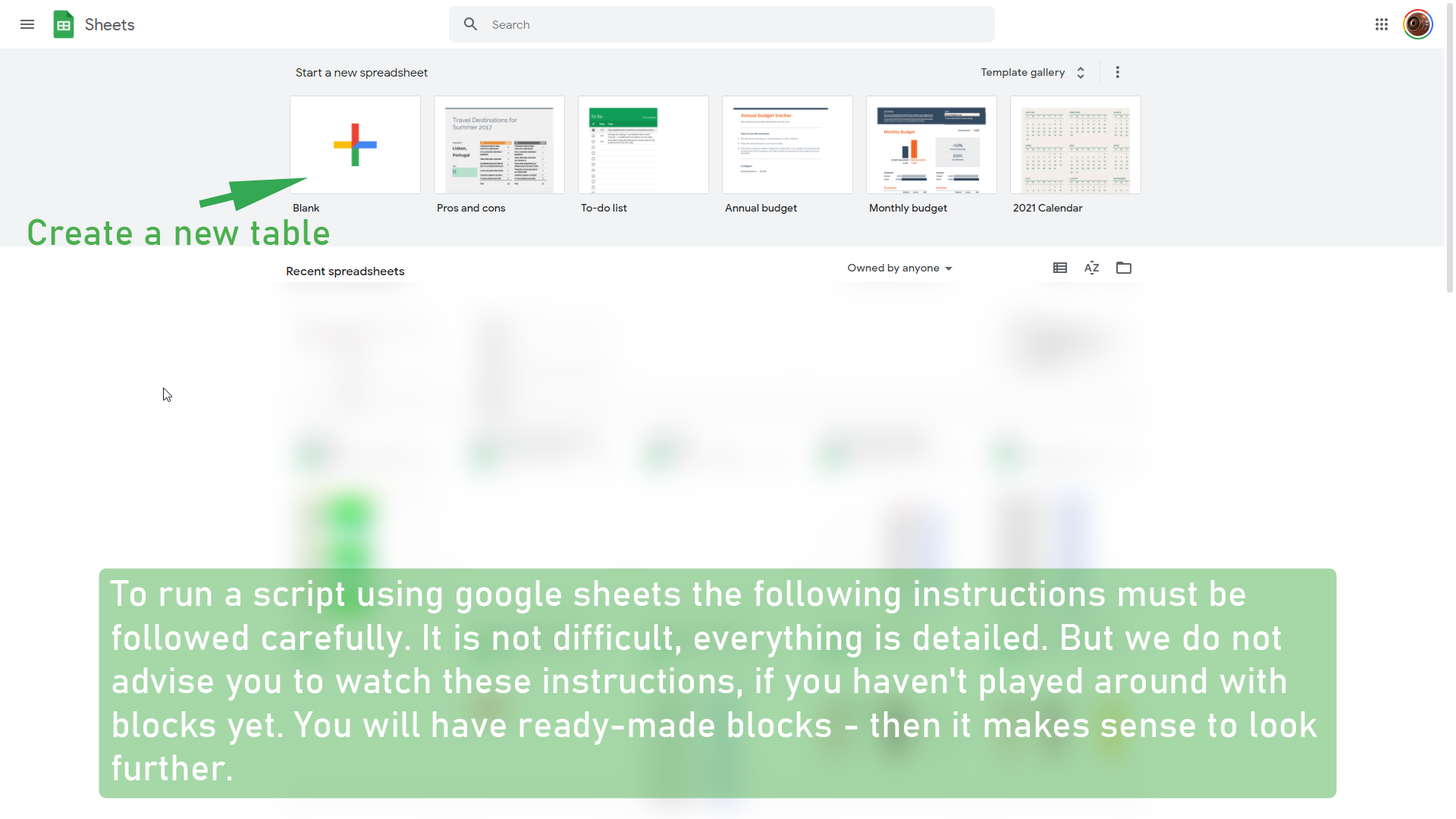
<style>
.page{position:relative;width:1456px;height:819px;background:#ffffff}
.page>*{position:absolute;margin:0}
.t1{font:36.4px "Bahnschrift";color:#4caf50}
.t2{font:36.4px "Bahnschrift";color:#ffffff}
</style>
<div class="page">
<p class="t1" style="left:28px;top:218px;width:301px;height:28px">Create a new table</p>
<p class="t2" style="left:110px;top:580px;width:1207px;height:201px">To run a script using google sheets the following instructions must be <br>followed carefully. It is not difficult, everything is detailed. But we do not <br>advise you to watch these instructions, if you haven't played around with <br>blocks yet. You will have ready-made blocks - then it makes sense to look <br>further.</p>
</div>
